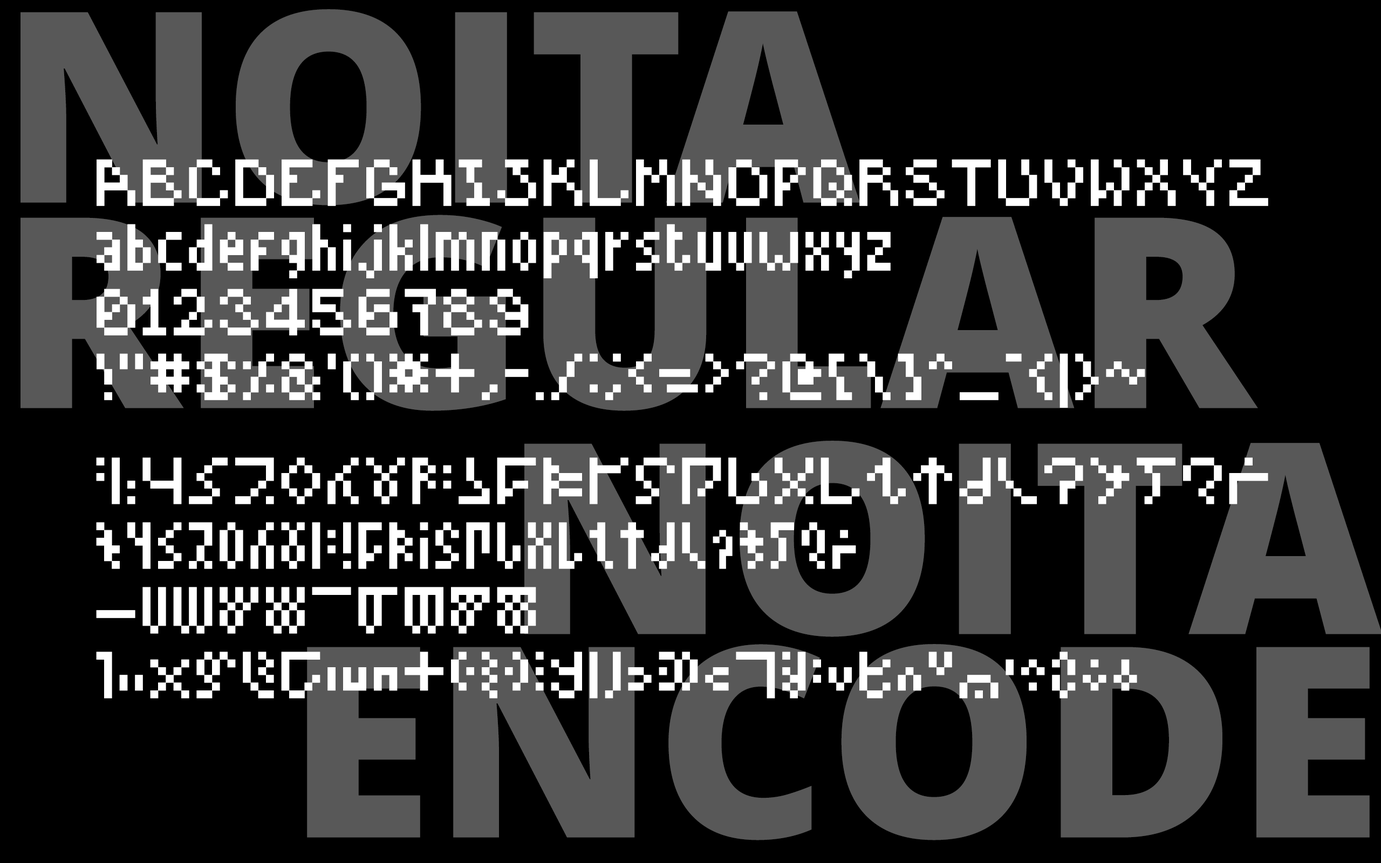
<style>
.page{position:relative;width:1381px;height:863px;background:#000000}
.page>*{position:absolute;margin:0}
.t1{font:266.5px/205.6px "OpenSans-Extrabold";color:#585858}
.t2{font:54px "Noita";color:#ffffff}
.t3{font:54px "NoitaEncode";color:#ffffff}
</style>
<div class="page">
<p class="t1" style="left:21px;top:9px;width:1237px;height:402px">NOITA<br>REGULAR</p>
<p class="t2" style="left:97px;top:159px;width:1171px;height:249px">ABCDEFGHIJKLMNOPQRSTUVWXYZ<br>abcdefghijklmnopqrstuvwxyz<br>0123456789<br>!"#$%&amp;'()*+,-./:;&lt;=&gt;?@[\]^_`{|}~</p>
<p class="t3" style="left:96px;top:458px;width:1172px;height:241px">ABCDEFGHIJKLMNOPQRSTUVWXYZ<br>abcdefghijklmnopqrstuvwxyz<br>0123456789<br>!"#$%&amp;'()*+,-./:;&lt;=&gt;?@[\]^_`{|}~</p>
</div>
